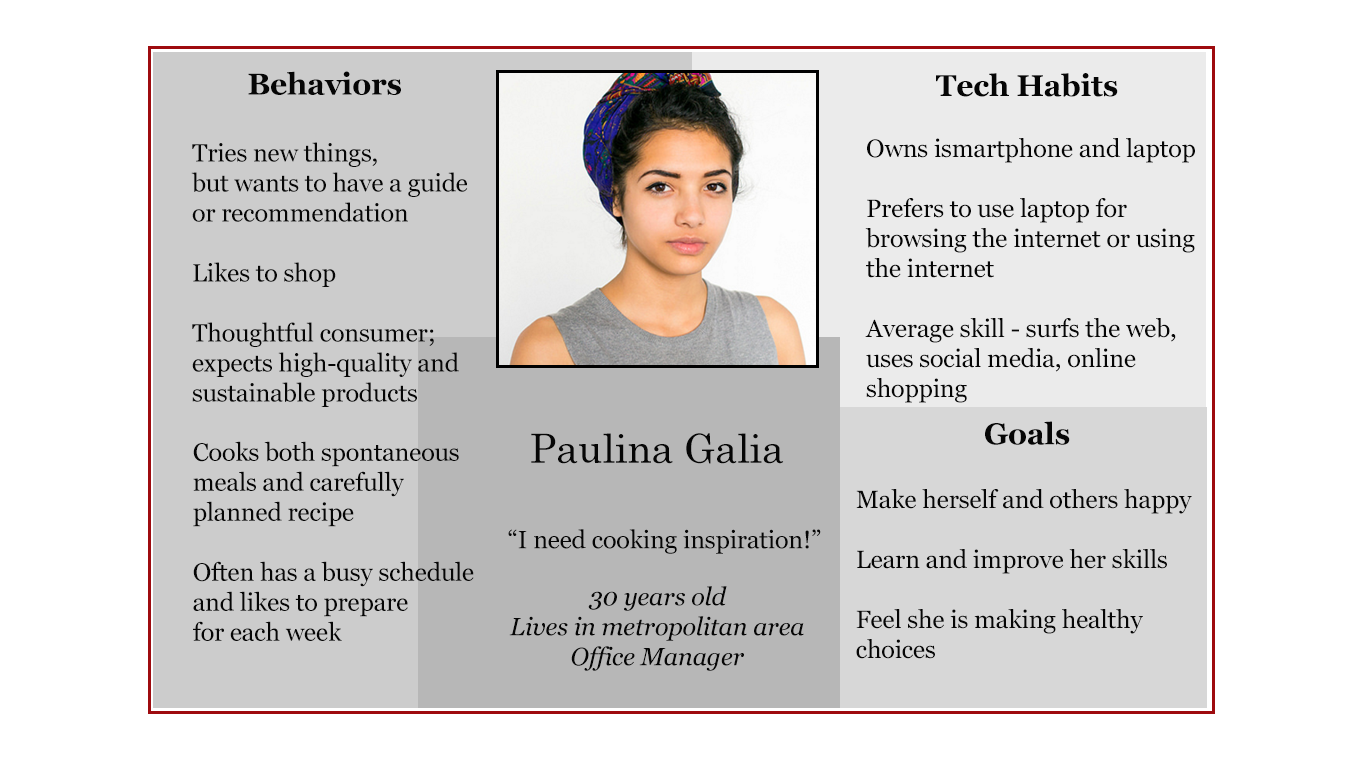
<style>
.page{position:relative;width:1366px;height:768px;background:#ffffff}
.page>*{position:absolute;margin:0}
.t1{font:30px "Georgia-Bold";letter-spacing:-0.006em;color:#060606}
.t2{font:25px "Georgia";letter-spacing:-0.006em;color:#060606}
.t3{font:40px "CenturySchoolbook";letter-spacing:-0.006em;color:#060606}
.t4{font:25px "Georgia-Italic";letter-spacing:-0.006em;color:#060606}
</style>
<div class="page">
<p class="t1" style="left:248px;top:71px;width:153px;height:24px">Behaviors</p>
<p class="t1" style="left:936px;top:73px;width:182px;height:24px">Tech Habits</p>
<p class="t2" style="left:191px;top:142px;width:277px;height:265px">Tries new things, <br>but wants to have a guide<br>or recommendation<br><br>Likes to shop<br><br>Thoughtful consumer; <br>expects high-quality and<br>sustainable products</p>
<p class="t2" style="left:865px;top:138px;width:330px;height:265px">Owns ismartphone and laptop<br><br>Prefers to use laptop for<br>browsing the internet or using <br>the internet<br><br>Average skill - surfs the web,<br>uses social media, online <br>shopping</p>
<p class="t1" style="left:985px;top:421px;width:85px;height:24px">Goals</p>
<p class="t3" style="left:531px;top:433px;width:253px;height:31px">Paulina Galia</p>
<p class="t2" style="left:193px;top:441px;width:281px;height:200px">Cooks both spontaneous <br>meals and carefully<br>planned recipe<br><br>Often has a busy schedule<br>and likes to prepare<br>for each week</p>
<p class="t2" style="left:856px;top:489px;width:336px;height:170px">Make herself and others happy<br><br>Learn and improve her skills<br><br>Feel she is making healthy<br>choices</p>
<p class="t2" style="left:508px;top:529px;width:313px;height:25px">“I need cooking inspiration!”</p>
<p class="t4" style="left:509px;top:586px;width:295px;height:85px;text-align:center">30 years old<br>Lives in metropolitan area<br>Office Manager</p>
</div>
